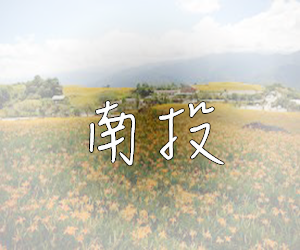
<style>
.page{position:relative;width:300px;height:250px}
.page>*{position:absolute;margin:0}
.t1{font:79px "DFHsiu-W3-WIN-BF";color:#fcfbfa}
</style>
<div class="page">
<p class="t1" style="left:89px;top:101px;width:135px;height:65px">南投</p>
</div>
